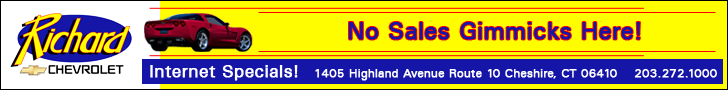
<style>
.page{position:relative;width:728px;height:90px;background:#fffd00}
.page>*{position:absolute;margin:0}
.t1{font:24px "Univers";color:#1515a8;font-weight:bold}
.t2{font:12px "Univers";letter-spacing:-0.01em;color:#ffffff;font-weight:bold}
.t3{font:18px "Univers";letter-spacing:-0.01em;color:#ffffff;font-weight:bold}
</style>
<div class="page">
<p class="t1" style="left:349px;top:22px;width:291px;height:18px">No Sales Gimmicks Here!</p>
<p class="t2" style="left:150px;top:65px;width:567px;height:16px"><span class="t3">Internet Specials! </span>  1405 Highland Avenue Route 10 Cheshire, CT 06410    203.272.1000</p>
</div>
